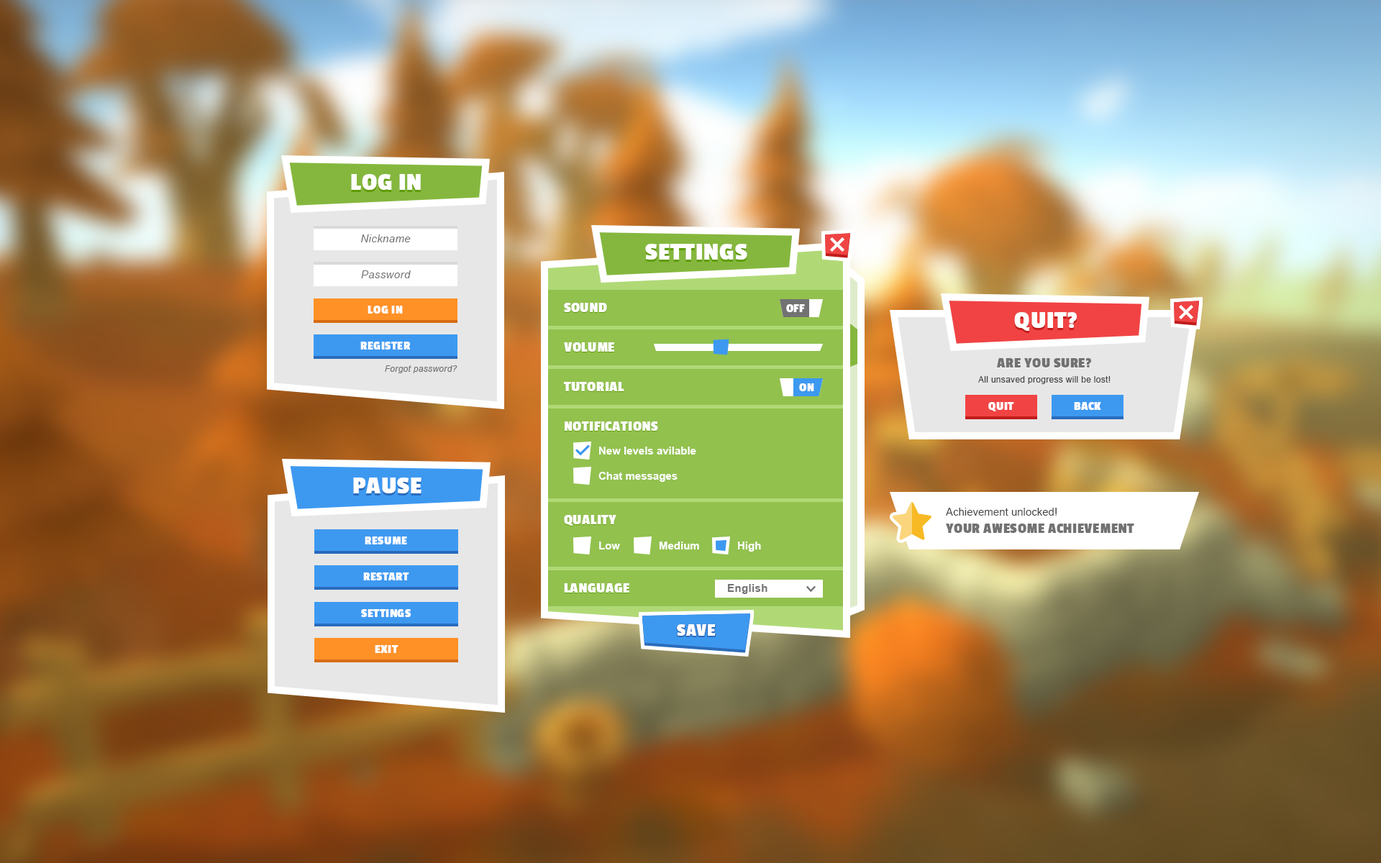
<style>
.page{position:relative;width:1381px;height:863px}
.page>*{position:absolute;margin:0}
.t1{font:25.2px "PassionOne-Bold";letter-spacing:0.025em;color:#ffffff;text-transform:uppercase}
.t2{font:10.8px "Arial-ItalicMT";letter-spacing:0.025em;color:#ffffff}
.t3{font:12.2px "PassionOne-Bold";letter-spacing:0.025em;color:#ffffff;text-transform:uppercase}
.t4{font:14.4px "PassionOne-Bold";letter-spacing:0.025em;color:#ffffff;text-transform:uppercase}
.t5{font:8.6px "Arial-ItalicMT";letter-spacing:0.025em;color:#727272}
.t6{font:14.4px "PassionOne-Bold";letter-spacing:0.025em;color:#727272;text-transform:uppercase}
.t7{font:8.6px "ArialMT";letter-spacing:0.025em;color:#454545}
.t8{font:10.8px "Arial-BoldMT";color:#ffffff}
.t9{font:10.8px "ArialMT";color:#454545}
.t10{font:10.8px "Arial-BoldMT";letter-spacing:0.025em;color:#ffffff}
.t11{font:18px "PassionOne-Bold";letter-spacing:0.025em;color:#ffffff;text-transform:uppercase}
</style>
<div class="page">
<p class="t1" style="left:351px;top:174px;width:70px;height:16px">Log in</p>
<p class="t2" style="left:361px;top:235px;width:50px;height:7px">Nickname</p>
<p class="t1" style="left:645px;top:244px;width:102px;height:16px">Settings</p>
<p class="t2" style="left:361px;top:270px;width:50px;height:8px">Password</p>
<p class="t3" style="left:368px;top:306px;width:35px;height:8px">Log in</p>
<p class="t4" style="left:564px;top:303px;width:43px;height:9px">Sound</p>
<p class="t3" style="left:786px;top:304px;width:19px;height:8px">Off</p>
<p class="t1" style="left:1014px;top:312px;width:63px;height:19px">Quit?</p>
<p class="t3" style="left:360px;top:342px;width:51px;height:8px">Register</p>
<p class="t4" style="left:564px;top:342px;width:50px;height:10px">Volume</p>
<p class="t5" style="left:385px;top:365px;width:73px;height:8px">Forgot password?</p>
<p class="t6" style="left:997px;top:358px;width:94px;height:10px">Are you sure?</p>
<p class="t7" style="left:978px;top:376px;width:133px;height:8px">All unsaved progress will be lost!</p>
<p class="t4" style="left:563px;top:382px;width:61px;height:9px">Tutorial</p>
<p class="t3" style="left:799px;top:383px;width:15px;height:8px">On</p>
<p class="t3" style="left:988px;top:402px;width:26px;height:10px">Quit</p>
<p class="t3" style="left:1074px;top:402px;width:27px;height:8px">Back</p>
<p class="t4" style="left:565px;top:422px;width:93px;height:9px">Notifications</p>
<p class="t8" style="left:599px;top:447px;width:97px;height:8px">New levels avilable</p>
<p class="t8" style="left:599px;top:472px;width:79px;height:10px">Chat messages</p>
<p class="t1" style="left:353px;top:478px;width:69px;height:16px">Pause</p>
<p class="t9" style="left:946px;top:508px;width:111px;height:8px">Achievement unlocked!</p>
<p class="t4" style="left:564px;top:515px;width:53px;height:11px">Quality</p>
<p class="t4" style="left:946px;top:524px;width:189px;height:9px">Your awesome achievement</p>
<p class="t3" style="left:365px;top:537px;width:42px;height:8px">Resume</p>
<p class="t8" style="left:599px;top:542px;width:21px;height:8px">Low</p>
<p class="t8" style="left:659px;top:542px;width:40px;height:8px">Medium</p>
<p class="t8" style="left:738px;top:542px;width:23px;height:10px">High</p>
<p class="t3" style="left:363px;top:573px;width:46px;height:8px">Restart</p>
<p class="t4" style="left:564px;top:583px;width:65px;height:10px">Language</p>
<p class="t10" style="left:728px;top:584px;width:40px;height:10px">English</p>
<p class="t3" style="left:361px;top:609px;width:50px;height:8px">Settings</p>
<p class="t11" style="left:677px;top:624px;width:39px;height:12px">Save</p>
<p class="t3" style="left:375px;top:645px;width:24px;height:8px">Exit</p>
</div>
